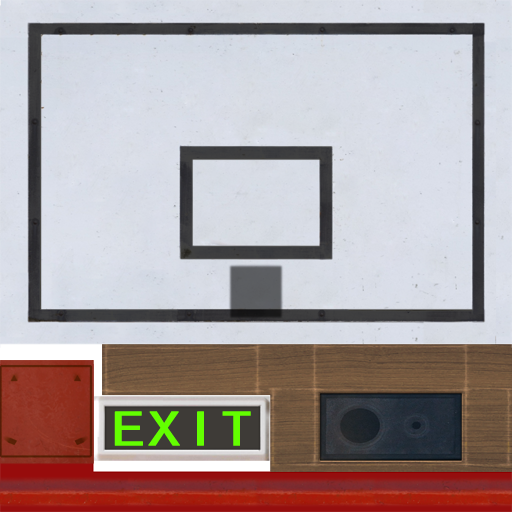
<style>
.page{position:relative;width:512px;height:512px}
.page>*{position:absolute;margin:0}
.t1{font:50px "SimHei";color:#63ff00;font-weight:bold;scale:1.37 1}
</style>
<div class="page">
<p class="t1" style="left:114px;top:411px;width:137px;height:35px">EXIT</p>
</div>
